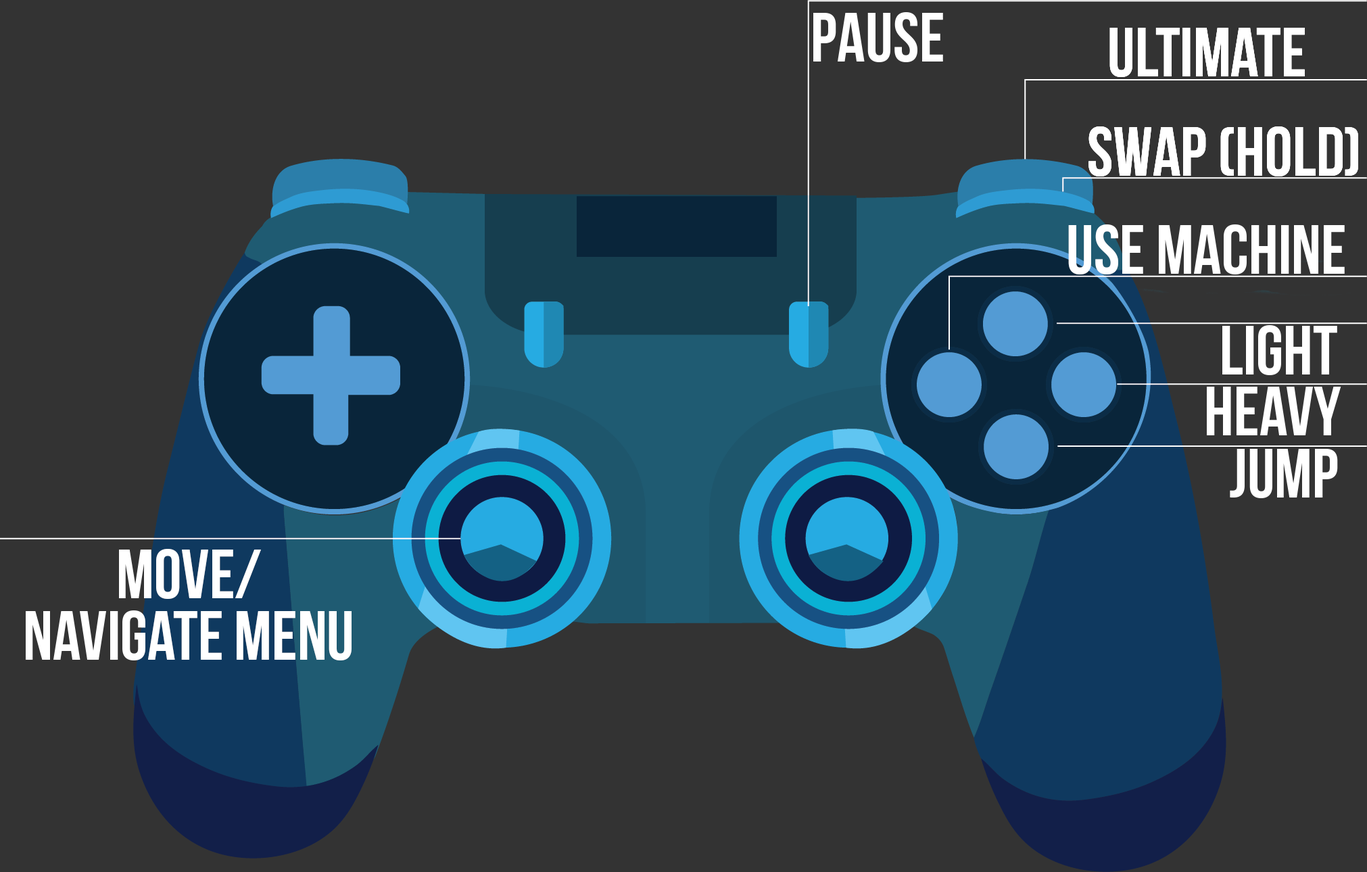
<style>
.page{position:relative;width:1367px;height:872px;background:#333333}
.page>*{position:absolute;margin:0}
.t1{font:69.4px "BebasNeue-Bold";color:#ffffff}
.t2{font:69.4px/61.8px "BebasNeue-Bold";color:#ffffff}
</style>
<div class="page">
<p class="t1" style="left:813px;top:12px;width:130px;height:50px">PAUSE</p>
<p class="t1" style="left:1068px;top:224px;width:277px;height:51px">USE MACHINE</p>
<p class="t1" style="left:1222px;top:325px;width:115px;height:50px">LIGHT</p>
<p class="t1" style="left:1207px;top:387px;width:134px;height:48px">HEavy</p>
<p class="t1" style="left:1230px;top:449px;width:108px;height:49px">JUMP</p>
<p class="t2" style="left:26px;top:549px;width:326px;height:112px;text-align:center">Move/<br>navigate menu</p>
</div>
